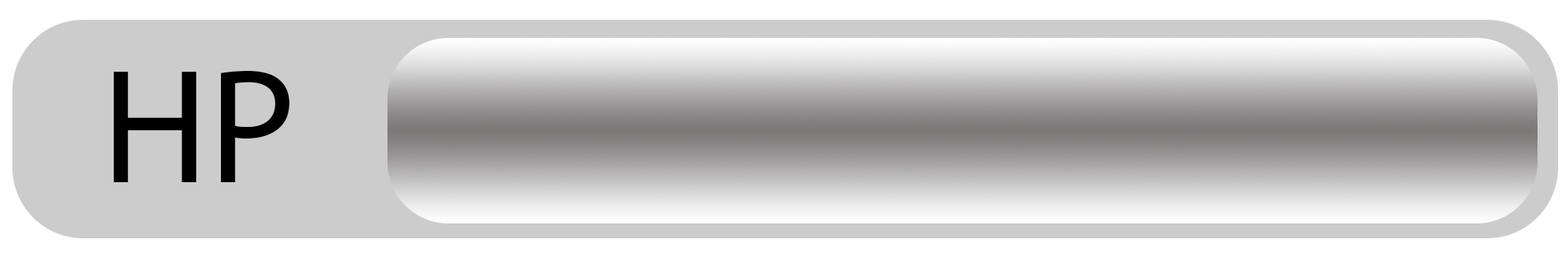
<style>
.page{position:relative;width:1568px;height:263px;background:#cccccc}
.page>*{position:absolute;margin:0}
.t1{font:164.5px "MyriadPro-Regular";color:#000000}
</style>
<div class="page">
<p class="t1" style="left:114px;top:71px;width:175px;height:111px">HP</p>
</div>
